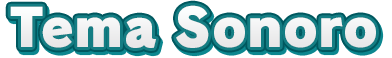
<style>
.page{position:relative;width:392px;height:58px;background:#ffffff}
.page>*{position:absolute;margin:0}
.t1{font:51.7px "RodinPro-UB";color:#efeff0}
</style>
<div class="page">
<p class="t1" style="left:10px;top:5px;width:366px;height:43px">Tema Sonoro</p>
</div>
